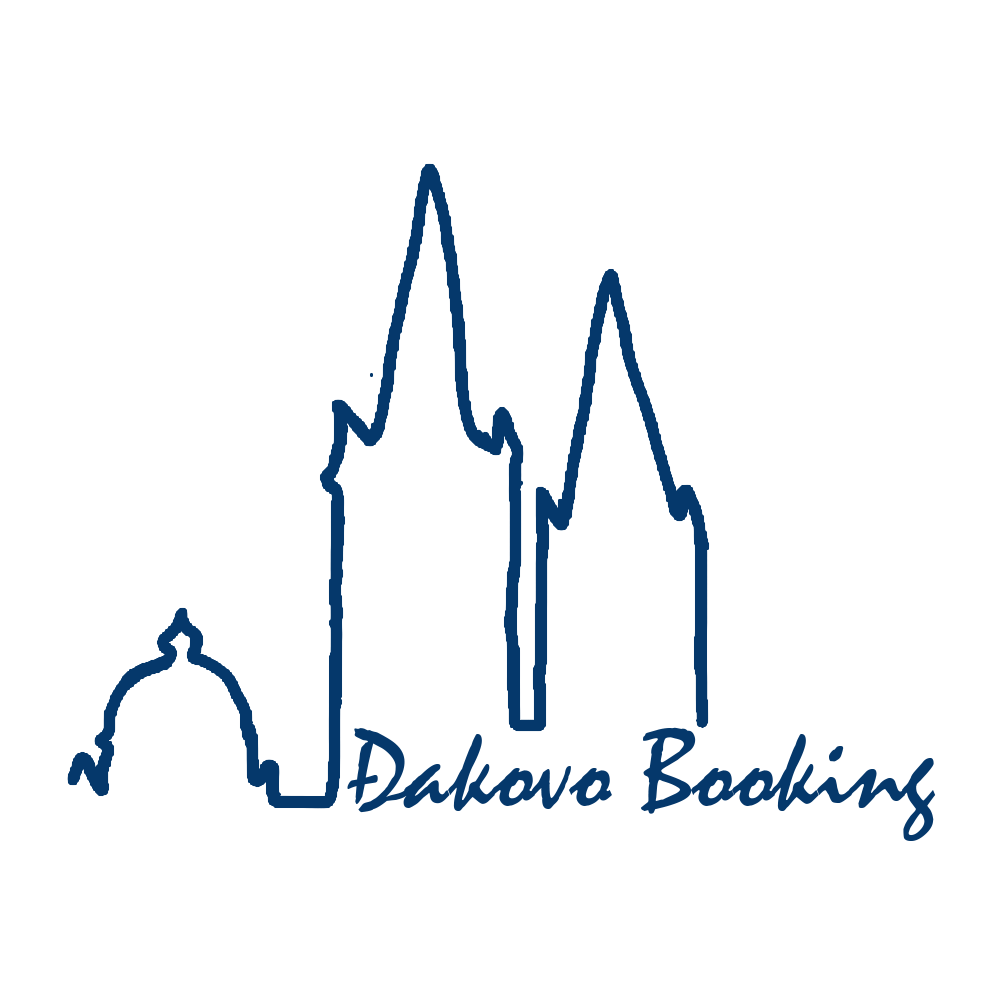
<style>
.page{position:relative;width:1000px;height:1000px;background:#ffffff}
.page>*{position:absolute;margin:0}
.t1{font:114.9px "Mistral";color:#05386b}
</style>
<div class="page">
<p class="t1" style="left:347px;top:727px;width:589px;height:114px">Đakovo Booking</p>
</div>
